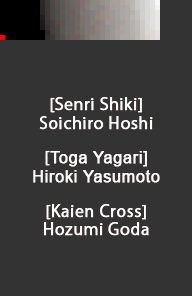
<style>
.page{position:relative;width:192px;height:296px;background:#333333}
.page>*{position:absolute;margin:0}
.t1{font:16px/18.7px "KozGoPr6N-Regular";letter-spacing:0.025em;color:#ffffff;font-weight:bold}
.t2{font:16px/18.7px "ArialMT";letter-spacing:0.025em;color:#ffffff;font-weight:bold}
</style>
<div class="page">
<p class="t1" style="left:33px;top:97px;width:127px;height:139px;text-align:center">[Senri Shiki]<br>Soichiro Hoshi<br> <br>[<span class="t2">Toga Yagari]<br>Hiroki Yasumoto<br> <br></span>[Kaien Cross]<br>Hozumi Goda</p>
</div>
